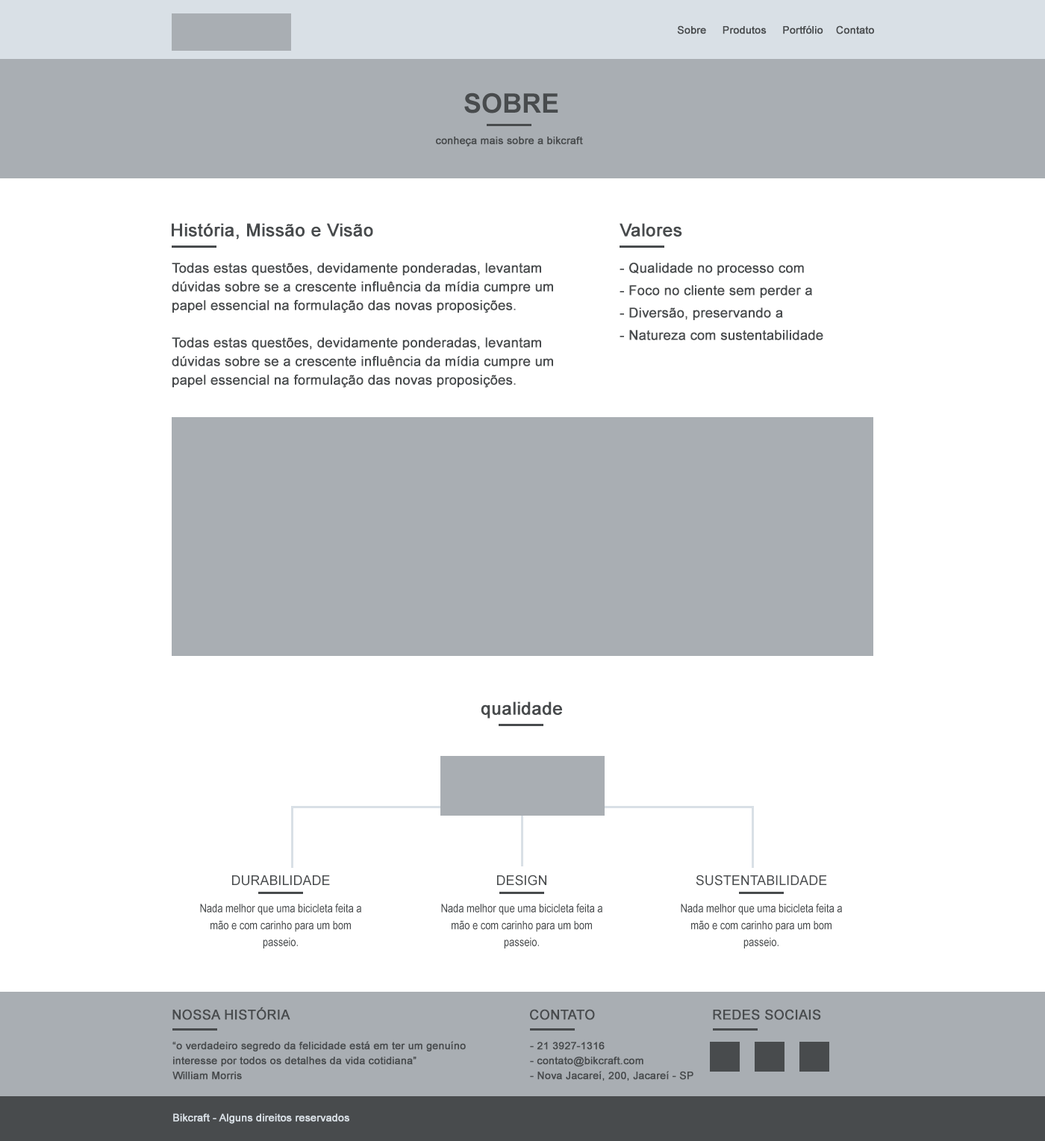
<style>
.page{position:relative;width:1045px;height:1141px;background:#ffffff}
.page>*{position:absolute;margin:0}
.t1{font:10.4px "ArialMT";color:#484b4d;font-weight:bold}
.t2{font:26.9px "Arial-BoldMT";color:#484b4d;text-transform:uppercase}
.t3{font:17.8px "ArialMT";color:#484b4d;font-weight:bold}
.t4{font:13.4px/18.7px "ArialMT";color:#484b4d;font-weight:bold}
.t5{font:13.4px/22.4px "ArialMT";color:#484b4d;font-weight:bold}
.t6{font:13.4px "ArialMT";color:#484b4d;text-transform:uppercase}
.t7{font:11.8px/16.9px "ArialMT";color:#484b4d;scale:0.82 1}
.t8{font:13.4px "ArialMT";color:#484b4d;text-transform:uppercase;font-weight:bold}
.t9{font:10.4px/14.9px "ArialMT";color:#484b4d;font-weight:bold}
.t10{font:10.4px "ArialMT";color:#d9e0e6;font-weight:bold}
</style>
<div class="page">
<p class="t1" style="left:677px;top:25px;width:197px;height:9px">Sobre     Produtos     Portfólio    Contato</p>
<p class="t2" style="left:464px;top:93px;width:94px;height:20px">sobre</p>
<p class="t1" style="left:436px;top:137px;width:147px;height:9px">conheça mais sobre a bikcraft</p>
<p class="t3" style="left:172px;top:223px;width:201px;height:17px">História, Missão e Visão</p>
<p class="t3" style="left:619px;top:223px;width:63px;height:14px">Valores</p>
<p class="t4" style="left:172px;top:263px;width:381px;height:124px">Todas estas questões, devidamente ponderadas, levantam dúvidas sobre se a crescente influência da mídia cumpre um papel essencial na formulação das novas proposições.<br><br>Todas estas questões, devidamente ponderadas, levantam dúvidas sobre se a crescente influência da mídia cumpre um papel essencial na formulação das novas proposições.</p>
<p class="t5" style="left:619px;top:263px;width:204px;height:77px">- Qualidade no processo com<br>- Foco no cliente sem perder a<br>- Diversão, preservando a<br>- Natureza com sustentabilidade</p>
<p class="t3" style="left:481px;top:702px;width:81px;height:17px">qualidade</p>
<p class="t6" style="left:232px;top:875px;width:98px;height:11px">durabilidade</p>
<p class="t6" style="left:497px;top:875px;width:49px;height:11px">design</p>
<p class="t6" style="left:696px;top:875px;width:131px;height:11px">sustentabilidade</p>
<p class="t7" style="left:200px;top:904px;width:161px;height:45px;text-align:center">Nada melhor que uma bicicleta feita a mão e com carinho para um bom passeio.</p>
<p class="t7" style="left:441px;top:904px;width:161px;height:45px;text-align:center">Nada melhor que uma bicicleta feita a mão e com carinho para um bom passeio.</p>
<p class="t7" style="left:681px;top:904px;width:161px;height:45px;text-align:center">Nada melhor que uma bicicleta feita a mão e com carinho para um bom passeio.</p>
<p class="t8" style="left:172px;top:1007px;width:118px;height:13px">Nossa história</p>
<p class="t8" style="left:530px;top:1009px;width:65px;height:11px">Contato</p>
<p class="t8" style="left:713px;top:1009px;width:108px;height:11px">Redes sociais</p>
<p class="t9" style="left:172px;top:1041px;width:294px;height:39px">“o verdadeiro segredo da felicidade está em ter um genuíno interesse por todos os detalhes da vida cotidiana”<br>William Morris</p>
<p class="t9" style="left:530px;top:1042px;width:163px;height:39px">- 21 3927-1316<br>- contato@bikcraft.com<br>- Nova Jacareí, 200, Jacareí - SP</p>
<p class="t10" style="left:173px;top:1114px;width:176px;height:10px">Bikcraft - Alguns direitos reservados</p>
</div>
